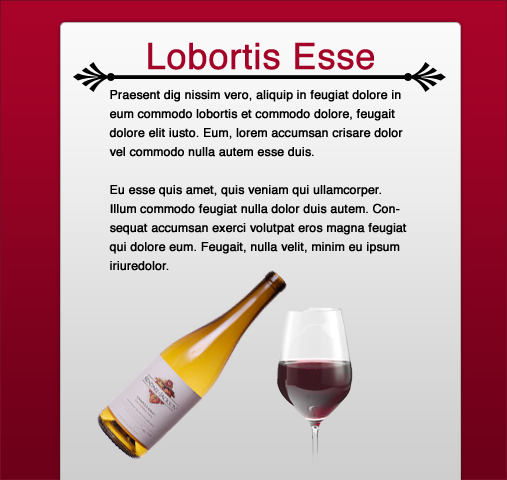
<style>
.page{position:relative;width:507px;height:480px}
.page>*{position:absolute;margin:0}
.t1{font:36px "Helvetica";color:#a40328;font-weight:bold}
.t2{font:12px/19px "Helvetica";color:#000000;font-weight:bold}
</style>
<div class="page">
<p class="t1" style="left:148px;top:42px;width:226px;height:28px">Lobortis Esse</p>
<p class="t2" style="left:109px;top:90px;width:298px;height:181px">Praesent dig nissim vero, aliquip in feugiat dolore in eum commodo lobortis et commodo dolore, feugait dolore elit iusto. Eum, lorem accumsan crisare dolor vel commodo nulla autem esse duis.<br><br>Eu esse quis amet, quis veniam qui ullamcorper. Illum commodo feugiat nulla dolor duis autem. Consequat accumsan exerci volutpat eros magna feugiat qui dolore eum. Feugait, nulla velit, minim eu ipsum iriuredolor.</p>
</div>
